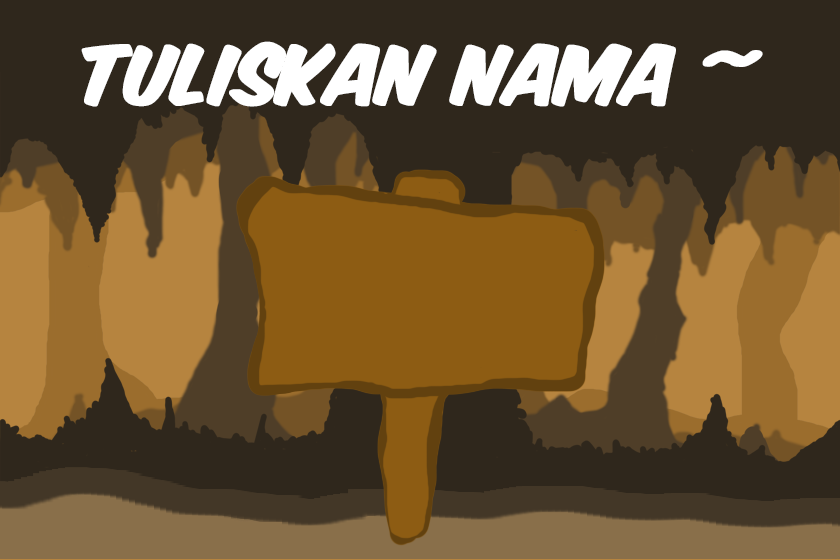
<style>
.page{position:relative;width:840px;height:560px;background:#2f271c}
.page>*{position:absolute;margin:0}
.t1{font:68.9px "KomikaAxis";color:#ffffff;font-weight:bold;font-style:italic}
</style>
<div class="page">
<p class="t1" style="left:81px;top:41px;width:682px;height:66px">TUliskan nama ~</p>
</div>
